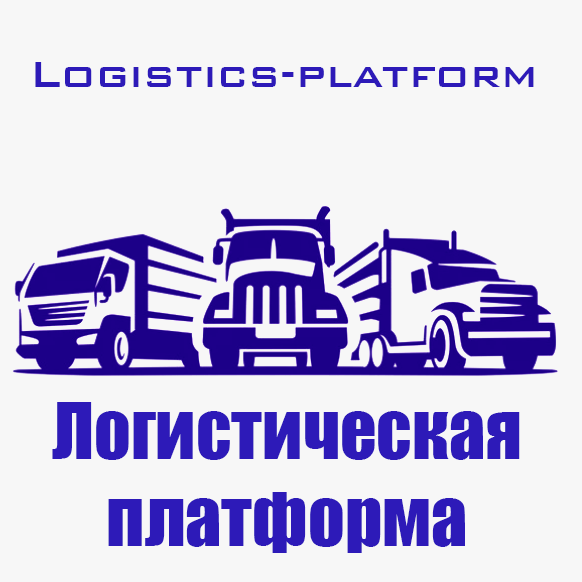
<style>
.page{position:relative;width:582px;height:582px;background:#f7f7f7}
.page>*{position:absolute;margin:0}
.t1{font:48px "BankGothicBT-Medium";color:#2d1ab8}
.t2{font:72px "Impact";color:#2d1ab8}
</style>
<div class="page">
<p class="t1" style="left:35px;top:62px;width:499px;height:25px">Logistics-platform</p>
<p class="t2" style="left:52px;top:402px;width:468px;height:151px;text-align:center">Логистическая<br>платформа</p>
</div>
